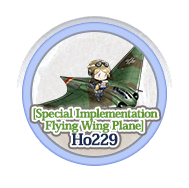
<style>
.page{position:relative;width:189px;height:188px;background:#ffffff}
.page>*{position:absolute;margin:0}
.t1{font:12px/12px "HeiseiMinStd-W7";letter-spacing:-0.04em;color:#619830;font-weight:bold}
.t2{font:16px/12px "HeiseiMinStd-W7";letter-spacing:-0.04em;color:#192a52;font-weight:bold}
</style>
<div class="page">
<p class="t1" style="left:33px;top:108px;width:125px;height:38px;text-align:center">[Special Implementation<br>Flying Wing Plane]<br><span class="t2">Ho229</span></p>
</div>
